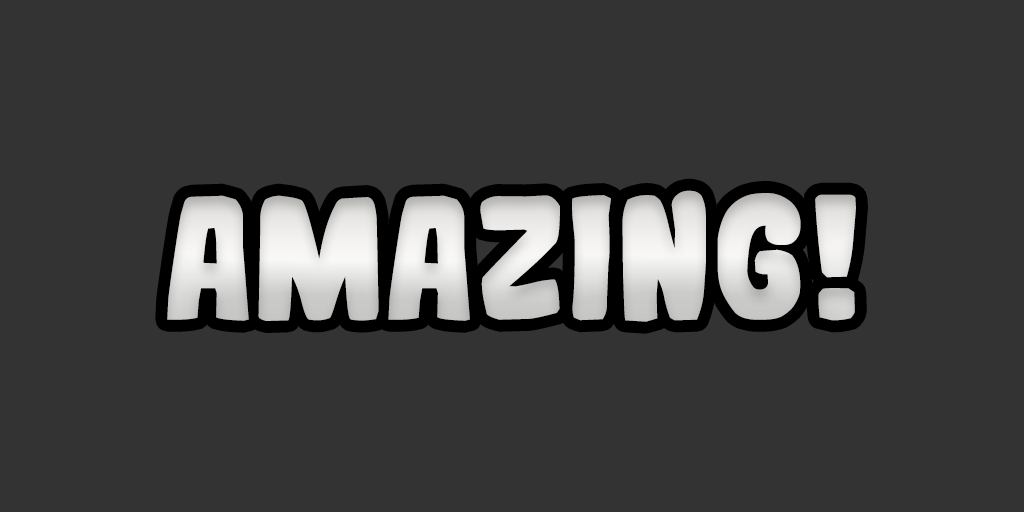
<style>
.page{position:relative;width:1024px;height:512px;background:#333333}
.page>*{position:absolute;margin:0}
.t1{font:166.7px "Gogono-Cocoa-Mochi"}
</style>
<div class="page">
<p class="t1" style="left:167px;top:190px;width:689px;height:132px">AMAZING!</p>
</div>
